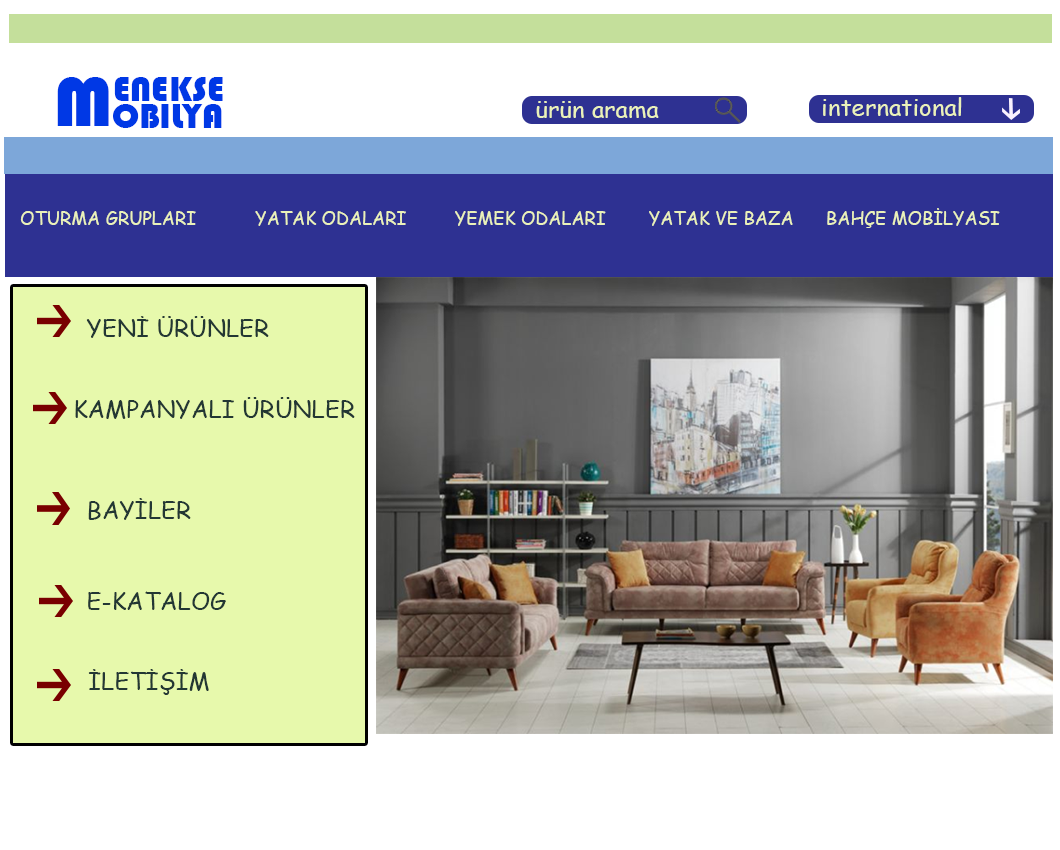
<style>
.page{position:relative;width:1060px;height:850px;background:#ffffff}
.page>*{position:absolute;margin:0}
.t1{font:72px "Bauhaus93";color:#0038e5}
.t2{font:36px "Bauhaus93";color:#0038e5}
.t3{font:24px "ComicSansMS";color:#eaf1ba}
.t4{font:18px "ComicSansMS";color:#eaf1ba}
.t5{font:24px "ComicSansMS";color:#233734}
</style>
<div class="page">
<p class="t1" style="left:57px;top:77px;width:52px;height:49px">M</p>
<p class="t2" style="left:114px;top:77px;width:109px;height:24px">ENEKSE</p>
<p class="t3" style="left:536px;top:101px;width:123px;height:17px">ürün arama</p>
<p class="t3" style="left:823px;top:97px;width:139px;height:19px">international</p>
<p class="t2" style="left:113px;top:104px;width:109px;height:24px">OBILYA</p>
<p class="t4" style="left:20px;top:208px;width:980px;height:20px">OTURMA GRUPLARI           YATAK ODALARI         YEMEK ODALARI        YATAK VE BAZA      BAHÇE MOBİLYASI</p>
<p class="t5" style="left:86px;top:316px;width:183px;height:22px">YENİ ÜRÜNLER</p>
<p class="t5" style="left:75px;top:397px;width:280px;height:22px">KAMPANYALI ÜRÜNLER</p>
<p class="t5" style="left:88px;top:498px;width:103px;height:22px">BAYİLER</p>
<p class="t5" style="left:88px;top:591px;width:138px;height:19px">E-KATALOG</p>
<p class="t5" style="left:88px;top:669px;width:121px;height:26px">İLETİŞİM</p>
</div>
